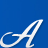
<style>
.page{position:relative;width:48px;height:48px}
.page>*{position:absolute;margin:0}
.t1{font:60px "Today";letter-spacing:-0.01em;color:#ffffff}
</style>
<div class="page">
<p class="t1" style="left:0px;top:19px;width:44px;height:29px">A</p>
</div>
